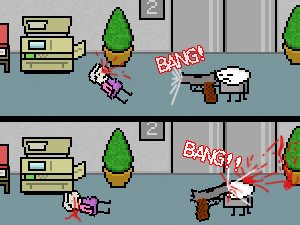
<style>
.page{position:relative;width:300px;height:225px}
.page>*{position:absolute;margin:0}
.t1{font:18px "Terminal";color:#e7e7e7}
.t2{font:18px "Terminal";color:#ffffff}
</style>
<div class="page">
<p class="t1" style="left:156px;top:46px;width:48px;height:27px;rotate:-17deg">BANG!</p>
<p class="t2" style="left:183px;top:141px;width:58px;height:30px;rotate:16deg">BANG!!</p>
</div>
